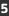
<style>
.page{position:relative;width:9px;height:16px;background:#333333}
.page>*{position:absolute;margin:0}
.t1{font:12.5px "RoundedMplus1c-ExtraBold";color:#ffffff}
</style>
<div class="page">
<p class="t1" style="left:1px;top:3px;width:7px;height:11px">5</p>
</div>
